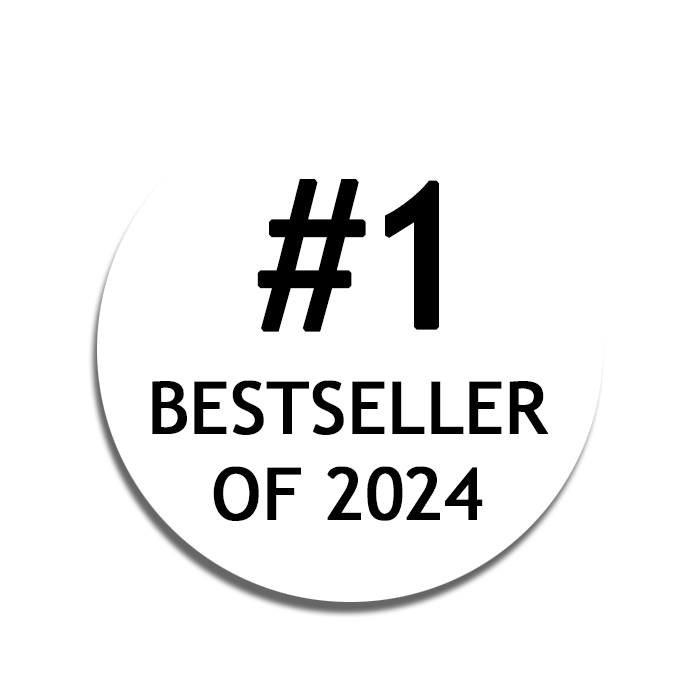
<style>
.page{position:relative;width:700px;height:700px;background:#ffffff}
.page>*{position:absolute;margin:0}
.t1{font:200px "TrebuchetMS";color:#000000;font-weight:bold}
.t2{font:72px "TrebuchetMS";color:#000000;font-weight:bold}
</style>
<div class="page">
<p class="t1" style="left:257px;top:179px;width:182px;height:153px">#1</p>
<p class="t2" style="left:152px;top:380px;width:396px;height:141px;text-align:center">BESTSELLER<br>OF 2024</p>
</div>
